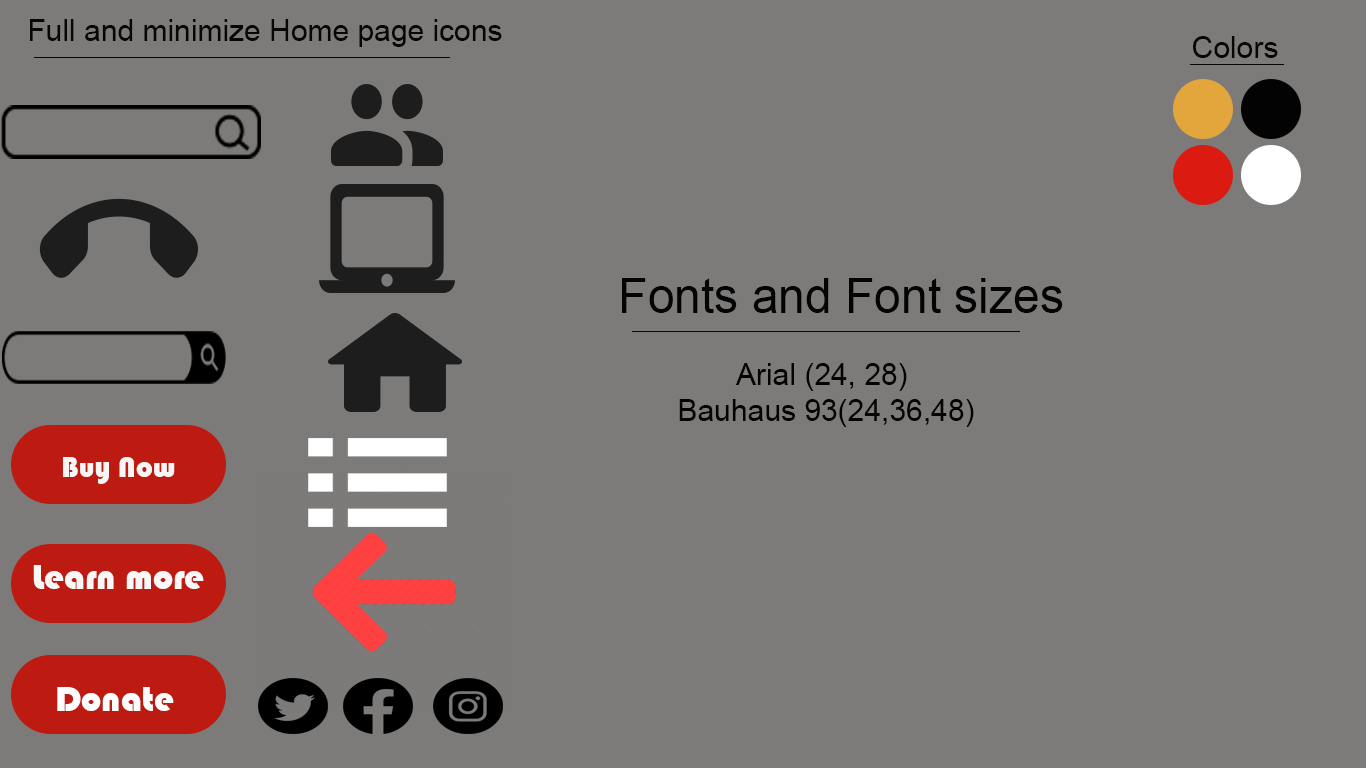
<style>
.page{position:relative;width:1366px;height:768px;background:#7c7b79}
.page>*{position:absolute;margin:0}
.t1{font:30px "ArialMT";color:#060606}
.t2{font:48px "ArialMT";color:#030303}
.t3{font:30px "ArialMT";color:#030303}
</style>
<div class="page">
<p class="t1" style="left:30px;top:19px;width:472px;height:28px">Full and minimize Home page icons</p>
<p class="t1" style="left:1193px;top:36px;width:85px;height:22px">Colors</p>
<p class="t2" style="left:622px;top:278px;width:441px;height:35px">Fonts and Font sizes</p>
<p class="t3" style="left:679px;top:363px;width:295px;height:64px;text-align:center">Arial (24, 28) <br>Bauhaus 93(24,36,48)</p>
</div>
